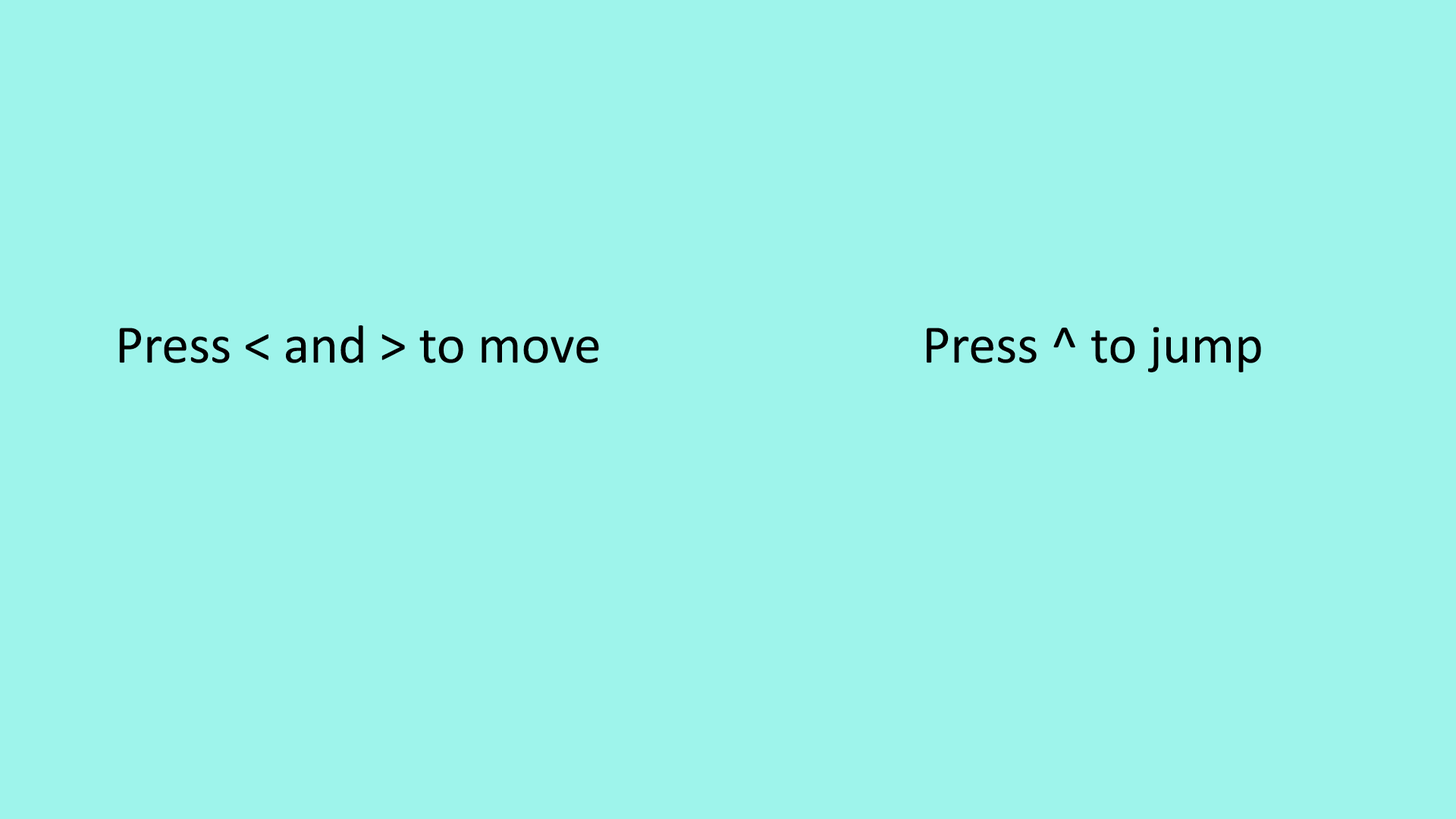
<style>
.page{position:relative;width:1456px;height:819px;background:#9ef4eb}
.page>*{position:absolute;margin:0}
.t1{font:54.6px "Calibri";color:#000000}
</style>
<div class="page">
<p class="t1" style="left:119px;top:325px;width:1142px;height:47px">Press &lt; and &gt; to move                          Press ^ to jump</p>
</div>
